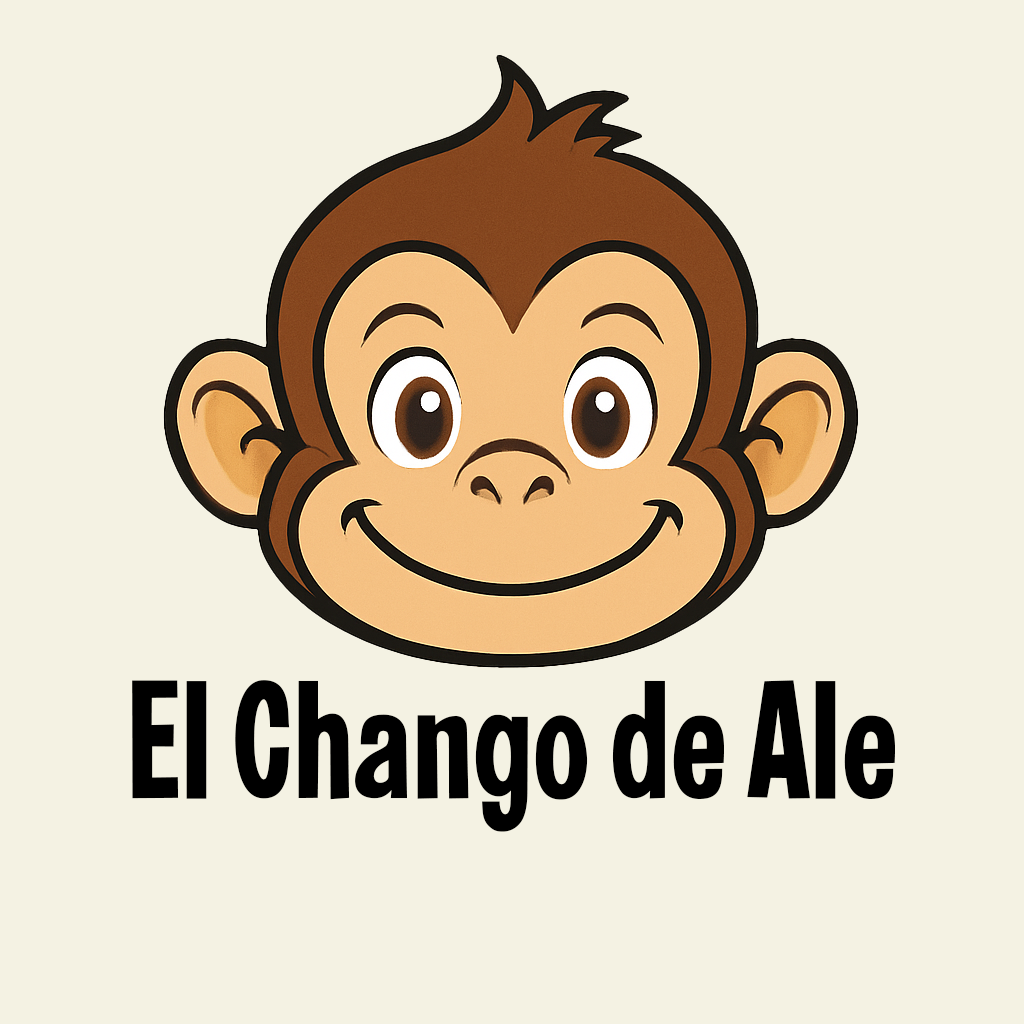
<style>
.page{position:relative;width:1024px;height:1024px;background:#f4f2e3}
.page>*{position:absolute;margin:0}
.t1{font:168px "Fontwax";color:#000000}
</style>
<div class="page">
<p class="t1" style="left:132px;top:680px;width:763px;height:152px">El Chango de Ale</p>
</div>
